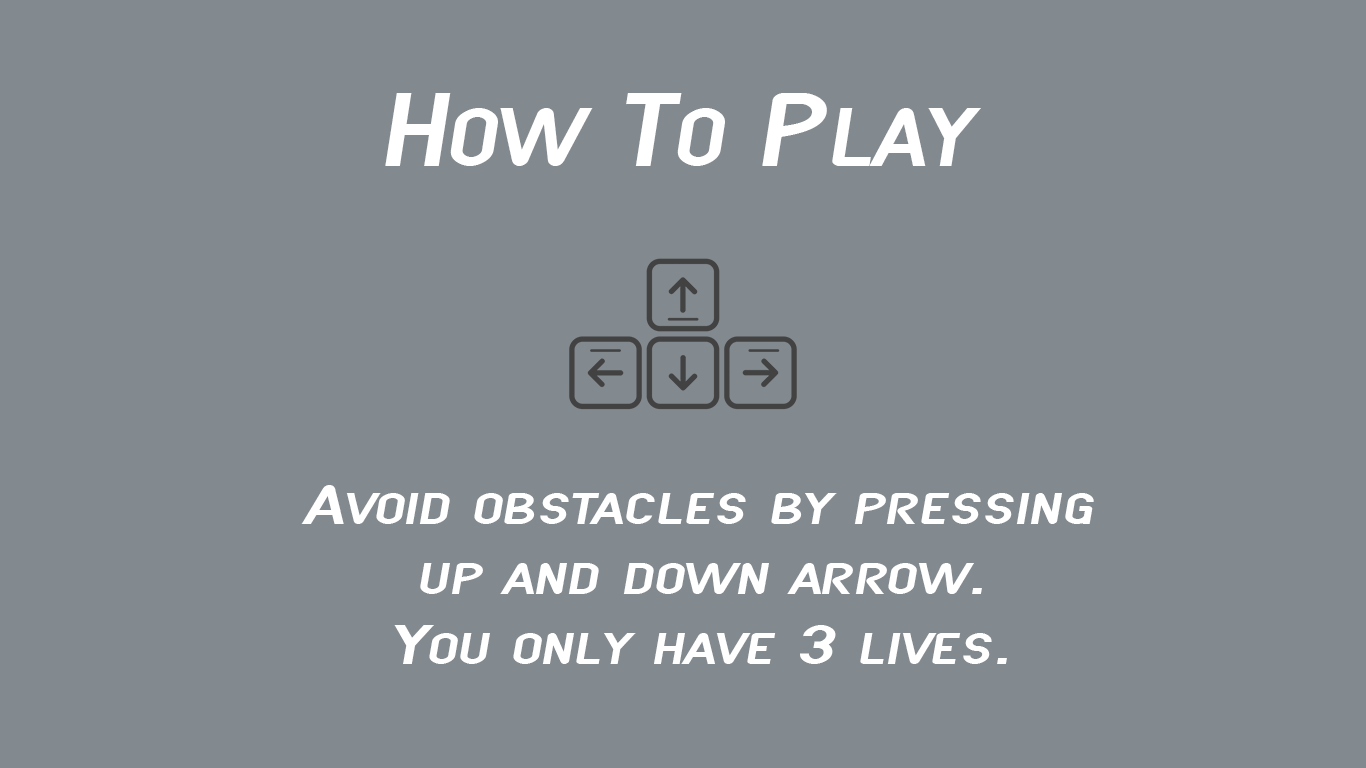
<style>
.page{position:relative;width:1366px;height:768px;background:#838a8f}
.page>*{position:absolute;margin:0}
.t1{font:109.2px "SFAtarianSystemExtendedItalic";color:#ffffff;scale:0.89 1}
.t2{font:58.3px "SFAtarianSystemExtendedItalic";color:#ffffff}
</style>
<div class="page">
<p class="t1" style="left:385px;top:93px;width:596px;height:73px">How To Play</p>
<p class="t2" style="left:301px;top:485px;width:793px;height:179px;text-align:center">Avoid obstacles by pressing<br>up and down arrow.<br>You only have 3 lives.</p>
</div>
